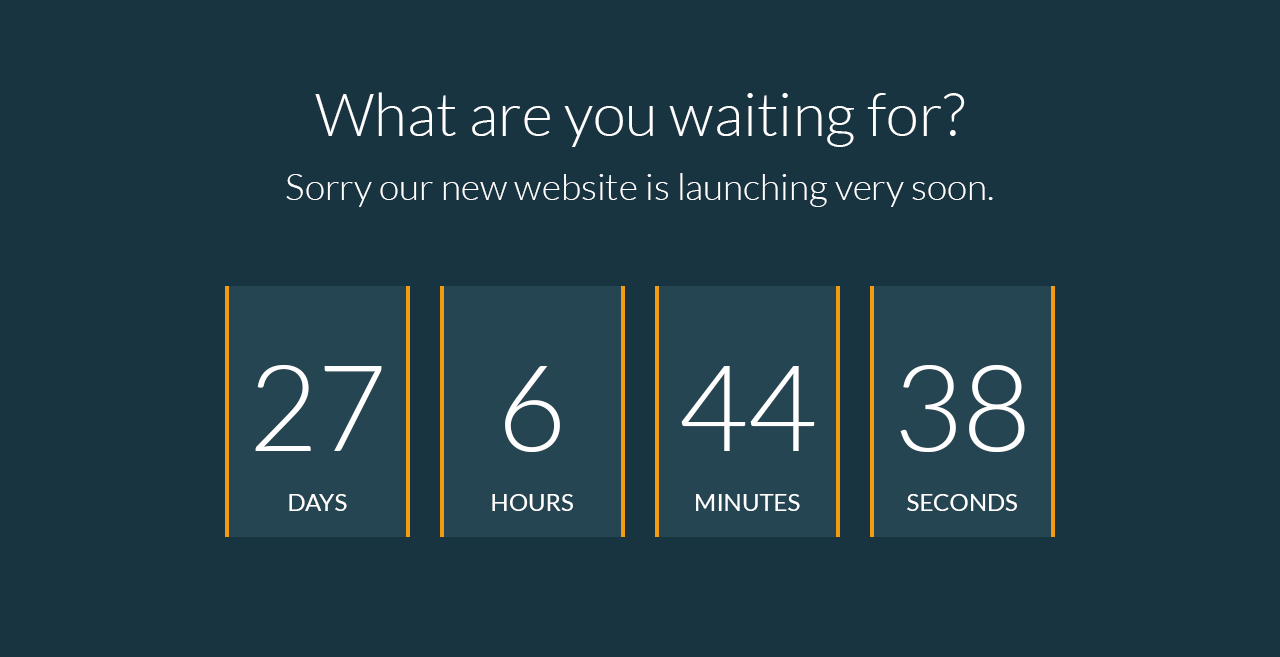
<style>
.page{position:relative;width:1280px;height:657px;background:#193441}
.page>*{position:absolute;margin:0}
.t1{font:60px "Lato-Light";color:#ffffff}
.t2{font:37px "Lato-Light";color:#ffffff}
.t3{font:120px "Lato-Light";color:#ffffff}
.t4{font:24px "Lato-Regular";color:#ffffff}
</style>
<div class="page">
<p class="t1" style="left:315px;top:92px;width:650px;height:55px">What are you waiting for?</p>
<p class="t2" style="left:286px;top:173px;width:707px;height:34px">Sorry our new website is launching very soon.</p>
<p class="t3" style="left:255px;top:365px;width:127px;height:86px">27</p>
<p class="t3" style="left:505px;top:366px;width:55px;height:86px">6</p>
<p class="t3" style="left:681px;top:366px;width:134px;height:85px">44</p>
<p class="t3" style="left:900px;top:365px;width:125px;height:87px">38</p>
<p class="t4" style="left:289px;top:494px;width:58px;height:17px">DAYS</p>
<p class="t4" style="left:492px;top:494px;width:81px;height:17px">HOURS</p>
<p class="t4" style="left:696px;top:494px;width:104px;height:17px">MINUTES</p>
<p class="t4" style="left:907px;top:494px;width:110px;height:17px">SECONDS</p>
</div>
